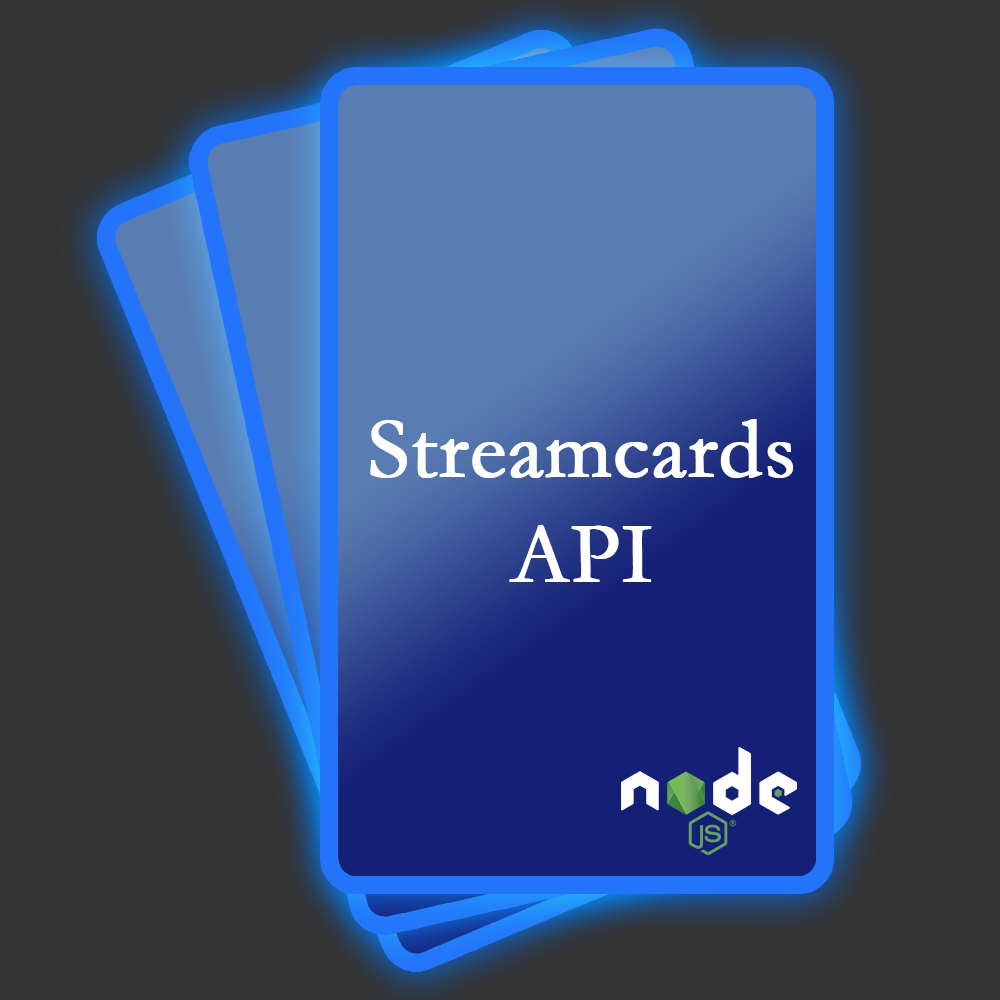
<style>
.page{position:relative;width:1000px;height:1000px;background:#333333}
.page>*{position:absolute;margin:0}
.t1{font:87.1px "Garamond";color:#ffffff;font-weight:bold}
</style>
<div class="page">
<p class="t1" style="left:370px;top:419px;width:423px;height:163px;text-align:center">Streamcards<br>API</p>
</div>
